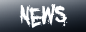
<style>
.page{position:relative;width:86px;height:32px}
.page>*{position:absolute;margin:0}
.t1{font:37.3px "YouMurdererBB";color:#ffffff;scale:0.84 1}
</style>
<div class="page">
<p class="t1" style="left:19px;top:4px;width:49px;height:24px">News</p>
</div>
